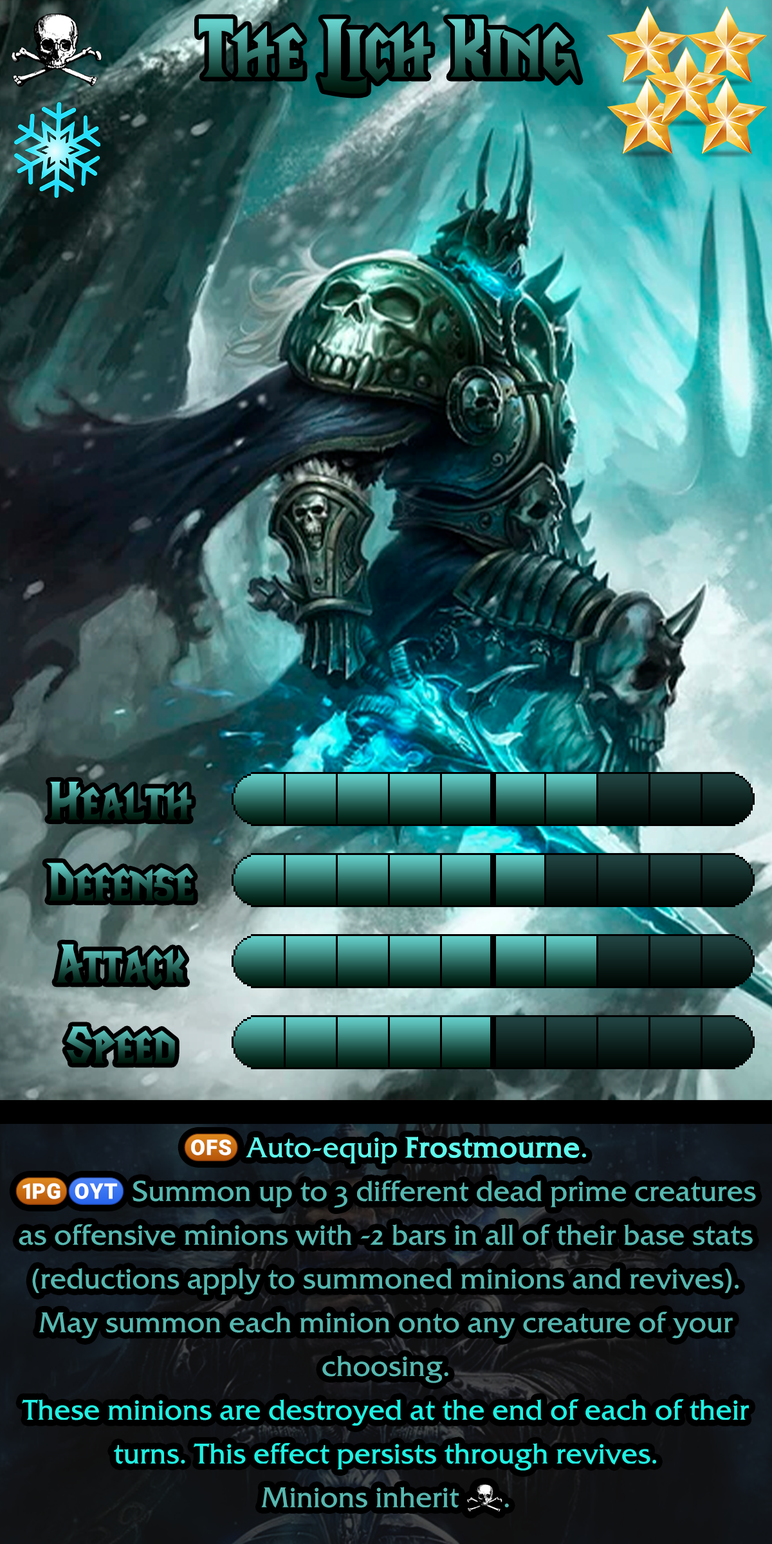
<style>
.page{position:relative;width:772px;height:1544px}
.page>*{position:absolute;margin:0}
.t1{font:141.6px "LifeCraft"}
.t2{font:92.7px "LifeCraft"}
.t3{font:48.3px/43.8px "FrizQua-ReguOS";color:#57b7b0}
.t4{font:48.3px/43.8px "stoogedings-Regular";color:#5ef7ec}
.t5{font:48.3px/43.8px "FrizQua-ReguOS";color:#5ef7ec}
.t6{font:48.3px/43.8px "FrizQua-ReguOS";color:#5ef7ec;font-weight:bold}
.t7{font:48.3px/43.8px "stoogedings-Regular";color:#57b7b0}
.t8{font:48.3px/43.8px "FrizQua-ReguOS";color:#20f0e2}
</style>
<div class="page">
<p class="t1" style="left:199px;top:19px;width:380px;height:75px">The Lich King</p>
<p class="t2" style="left:49px;top:782px;width:143px;height:38px">Health</p>
<p class="t2" style="left:46px;top:863px;width:148px;height:38px">Defense</p>
<p class="t2" style="left:56px;top:944px;width:130px;height:42px">Attack</p>
<p class="t2" style="left:66px;top:1026px;width:109px;height:38px">Speed</p>
<p class="t3" style="left:15px;top:1134px;width:741px;height:379px;text-align:center"><span class="t4">(OFS)</span><span class="t5"> Auto-equip </span><span class="t6">Frostmourne</span><span class="t5">.<br></span><span class="t7">(1PG)(OYT)</span> Summon up to 3 different dead prime creatures as offensive minions with -2 bars in all of their base stats (reductions apply to summoned minions and revives).<br>May summon each minion onto any creature of your choosing.<br><span class="t8">These minions are destroyed at the end of each of their turns. This effect persists through revives.<br></span>Minions inherit <span class="t7">[undead]</span>.</p>
</div>
